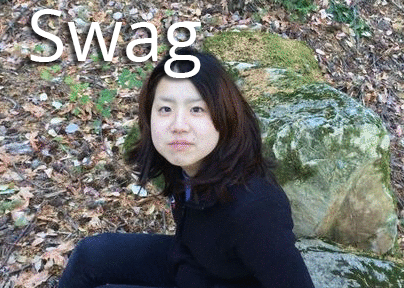
<style>
.page{position:relative;width:404px;height:288px}
.page>*{position:absolute;margin:0}
.t1{font:72px "OpenSans";color:#ffffff}
</style>
<div class="page">
<p class="t1" style="left:30px;top:9px;width:171px;height:69px">Swag</p>
</div>
